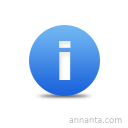
<style>
.page{position:relative;width:128px;height:128px;background:#ffffff}
.page>*{position:absolute;margin:0}
.t1{font:10px "Calibri";color:#bbbbbb}
</style>
<div class="page">
<p class="t1" style="left:69px;top:117px;width:53px;height:6px">annanta.com</p>
</div>
